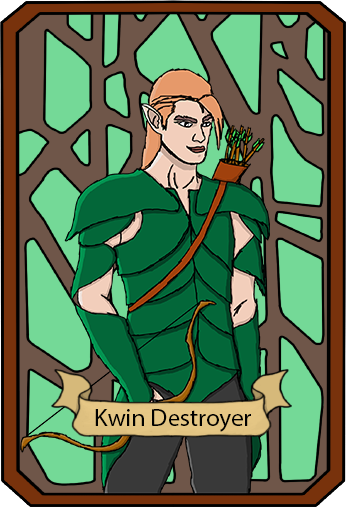
<style>
.page{position:relative;width:346px;height:507px;background:#74d997}
.page>*{position:absolute;margin:0}
.t1{font:25px "MyriadPro-Regular";color:#000000}
</style>
<div class="page">
<p class="t1" style="left:95px;top:409px;width:156px;height:23px">Kwin Destroyer</p>
</div>
